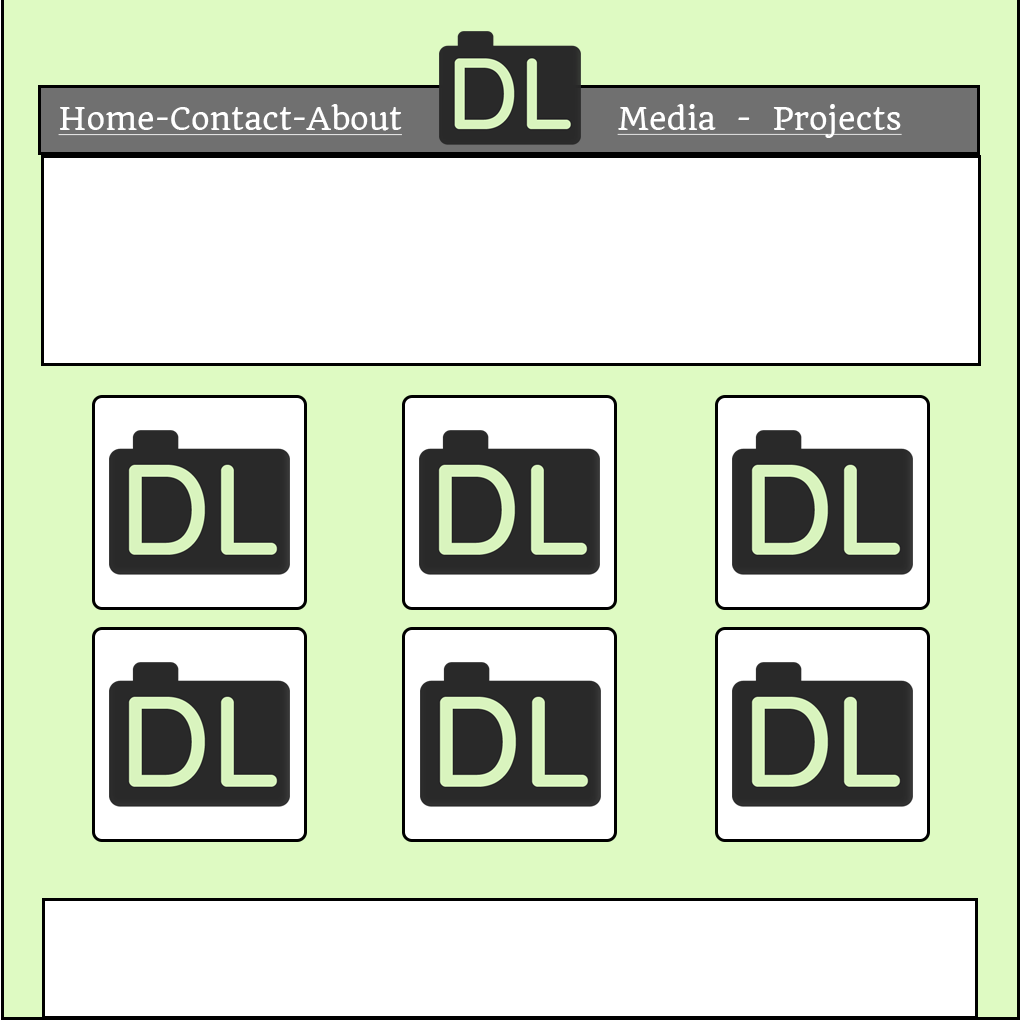
<style>
.page{position:relative;width:1020px;height:1020px;background:#ffffff}
.page>*{position:absolute;margin:0}
.t1{font:30px "Quando-Regular";color:#ffffff;text-decoration:underline}
</style>
<div class="page">
<p class="t1" style="left:58px;top:104px;width:344px;height:32px">Home-Contact-About</p>
<p class="t1" style="left:617px;top:104px;width:285px;height:34px">Media  -  Projects</p>
</div>
